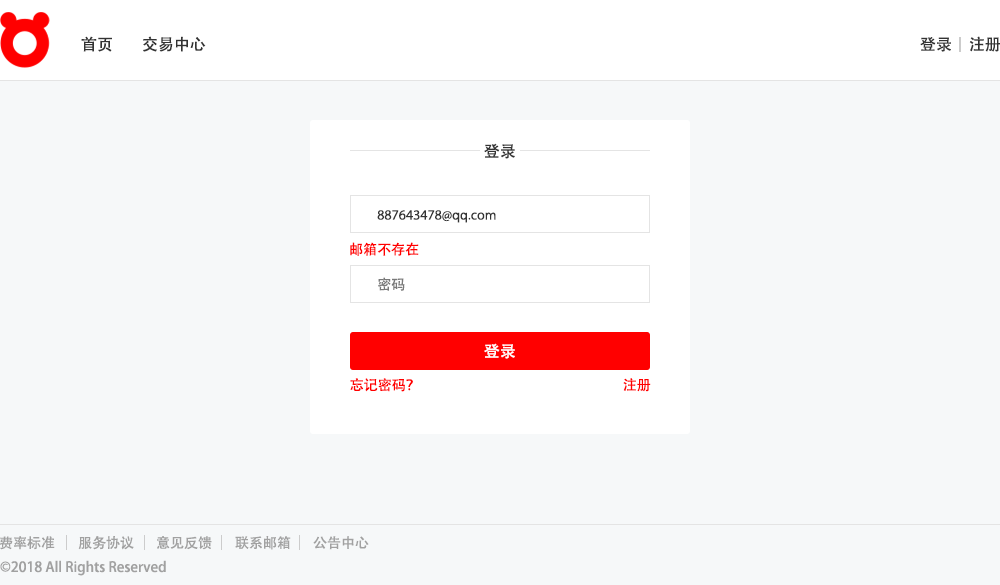
<style>
.page{position:relative;width:1000px;height:585px;background:#f6f8f9}
.page>*{position:absolute;margin:0}
.t1{font:16px "AdobeHeitiStd-Regular";color:#333333}
.t2{font:14px "MyriadPro-Regular";color:#333333}
.t3{font:14px "AdobeHeitiStd-Regular";color:#ff0000}
.t4{font:14px "AdobeHeitiStd-Regular";color:#797979}
.t5{font:16px "AdobeHeitiStd-Regular";color:#ffffff}
.t6{font:14px "AdobeHeitiStd-Regular";color:#a1a1a1}
</style>
<div class="page">
<p class="t1" style="left:81px;top:36px;width:31px;height:16px">首页</p>
<p class="t1" style="left:143px;top:36px;width:63px;height:16px">交易中心</p>
<p class="t1" style="left:920px;top:37px;width:31px;height:15px">登录</p>
<p class="t1" style="left:969px;top:36px;width:32px;height:16px">注册</p>
<p class="t1" style="left:484px;top:143px;width:31px;height:16px">登录</p>
<p class="t2" style="left:377px;top:210px;width:119px;height:13px">887643478@qq.com</p>
<p class="t3" style="left:350px;top:242px;width:69px;height:14px">邮箱不存在</p>
<p class="t4" style="left:378px;top:277px;width:27px;height:14px">密码</p>
<p class="t5" style="left:484px;top:343px;width:31px;height:16px">登录</p>
<p class="t3" style="left:350px;top:378px;width:63px;height:14px">忘记密码？</p>
<p class="t3" style="left:623px;top:378px;width:28px;height:14px">注册</p>
<p class="t6" style="left:0px;top:536px;width:55px;height:14px">费率标准</p>
<p class="t6" style="left:78px;top:536px;width:56px;height:14px">服务协议</p>
<p class="t6" style="left:157px;top:536px;width:55px;height:14px">意见反馈</p>
<p class="t6" style="left:235px;top:536px;width:56px;height:14px">联系邮箱</p>
<p class="t6" style="left:313px;top:536px;width:56px;height:14px">公告中心</p>
<p class="t6" style="left:0px;top:560px;width:166px;height:16px">©2018 All Rights Reserved</p>
</div>
